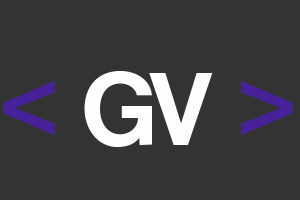
<style>
.page{position:relative;width:300px;height:200px;background:#333333}
.page>*{position:absolute;margin:0}
.t1{font:108.3px "CoolveticaRg-Regular";color:#fffefe}
.t2{font:108.3px "CoolveticaRg-Regular";color:#46219a}
</style>
<div class="page">
<p class="t1" style="left:3px;top:70px;width:290px;height:77px"><span class="t2">&lt; </span>GV <span class="t2">&gt;</span></p>
</div>
